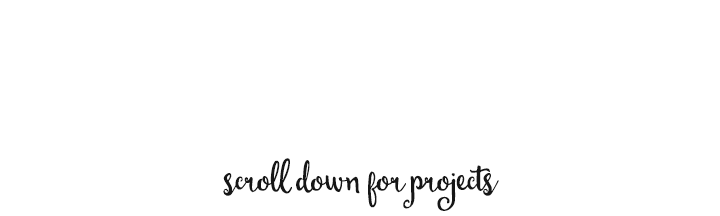
<style>
.page{position:relative;width:720px;height:216px;background:#ffffff}
.page>*{position:absolute;margin:0}
.t1{font:45px "Michael";color:#161616}
</style>
<div class="page">
<p class="t1" style="left:223px;top:158px;width:276px;height:53px">scroll down for projects</p>
</div>
